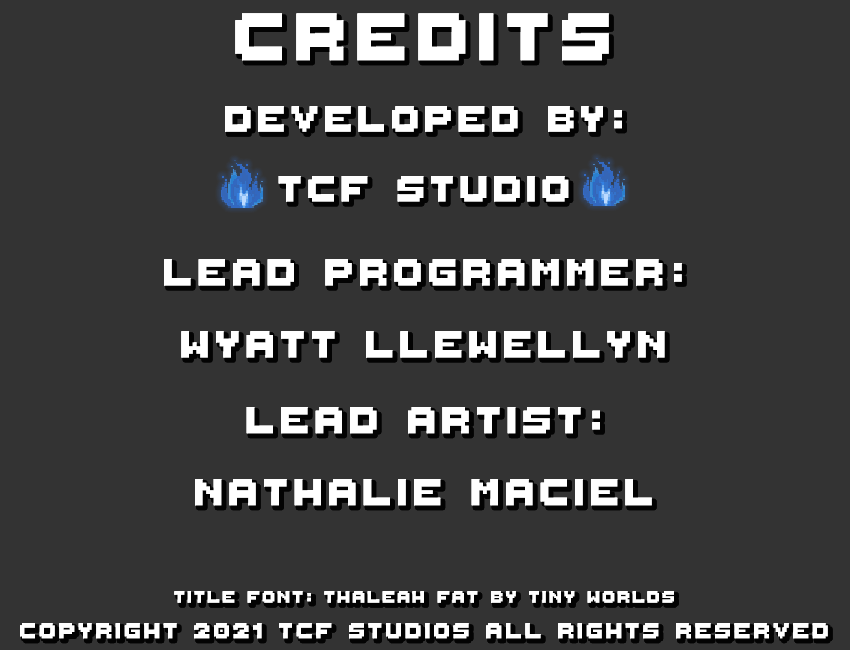
<style>
.page{position:relative;width:850px;height:650px;background:#333333}
.page>*{position:absolute;margin:0}
.t1{font:106.2px "ThaleahFat";letter-spacing:0.075em;color:#ffffff}
.t2{font:58.1px "ThaleahFat";letter-spacing:0.075em;color:#ffffff}
.t3{font:60px "ThaleahFat";letter-spacing:0.075em;color:#ffffff}
.t4{font:26px "ThaleahFat";letter-spacing:0.075em;color:#ffffff}
.t5{font:34px "ThaleahFat";letter-spacing:0.075em;color:#ffffff}
</style>
<div class="page">
<p class="t1" style="left:235px;top:13px;width:374px;height:48px">credits</p>
<p class="t1" style="left:235px;top:13px;width:374px;height:48px">credits</p>
<p class="t1" style="left:235px;top:13px;width:374px;height:48px">credits</p>
<p class="t1" style="left:235px;top:13px;width:374px;height:48px">credits</p>
<p class="t2" style="left:225px;top:106px;width:397px;height:96px;text-align:center">developed by:<br>TCF studio</p>
<p class="t2" style="left:225px;top:106px;width:397px;height:96px;text-align:center">developed by:<br>TCF studio</p>
<p class="t2" style="left:225px;top:106px;width:397px;height:96px;text-align:center">developed by:<br>TCF studio</p>
<p class="t2" style="left:225px;top:106px;width:397px;height:96px;text-align:center">developed by:<br>TCF studio</p>
<p class="t3" style="left:164px;top:259px;width:518px;height:99px;text-align:center">lead programmer: <br>Wyatt Llewellyn</p>
<p class="t3" style="left:164px;top:259px;width:518px;height:99px;text-align:center">lead programmer: <br>Wyatt Llewellyn</p>
<p class="t3" style="left:164px;top:259px;width:518px;height:99px;text-align:center">lead programmer: <br>Wyatt Llewellyn</p>
<p class="t3" style="left:164px;top:259px;width:518px;height:99px;text-align:center">lead programmer: <br>Wyatt Llewellyn</p>
<p class="t3" style="left:195px;top:407px;width:457px;height:99px;text-align:center">lead artist: <br>nathalie maciel</p>
<p class="t3" style="left:195px;top:407px;width:457px;height:99px;text-align:center">lead artist: <br>nathalie maciel</p>
<p class="t3" style="left:195px;top:407px;width:457px;height:99px;text-align:center">lead artist: <br>nathalie maciel</p>
<p class="t3" style="left:195px;top:407px;width:457px;height:99px;text-align:center">lead artist: <br>nathalie maciel</p>
<p class="t4" style="left:174px;top:591px;width:500px;height:12px">title font: thaleah fat by tiny worlds</p>
<p class="t4" style="left:174px;top:591px;width:500px;height:12px">title font: thaleah fat by tiny worlds</p>
<p class="t4" style="left:174px;top:591px;width:500px;height:12px">title font: thaleah fat by tiny worlds</p>
<p class="t4" style="left:174px;top:591px;width:500px;height:12px">title font: thaleah fat by tiny worlds</p>
<p class="t5" style="left:20px;top:623px;width:808px;height:16px">copyright 2021 TCF studios all rights reserved</p>
<p class="t5" style="left:20px;top:623px;width:808px;height:16px">copyright 2021 TCF studios all rights reserved</p>
<p class="t5" style="left:20px;top:623px;width:808px;height:16px">copyright 2021 TCF studios all rights reserved</p>
<p class="t5" style="left:20px;top:623px;width:808px;height:16px">copyright 2021 TCF studios all rights reserved</p>
</div>
